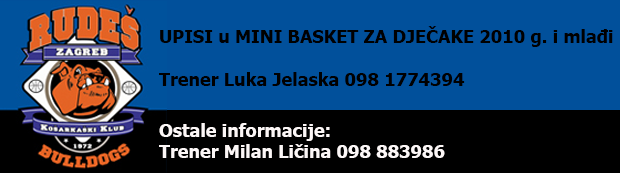
<style>
.page{position:relative;width:620px;height:173px;background:#01509b}
.page>*{position:absolute;margin:0}
.t1{font:18px "Tahoma-Bold";color:#000000}
.t2{font:18px "Tahoma-Bold";color:#fcf7f7}
</style>
<div class="page">
<p class="t1" style="left:159px;top:26px;width:454px;height:132px">UPISI u MINI BASKET ZA DJEČAKE 2010 g. i mlađi<br><br>Trener Luka Jelaska 098 1774394<br><br><span class="t2">Ostale informacije:<br>Trener Milan Ličina 098 883986</span></p>
</div>
